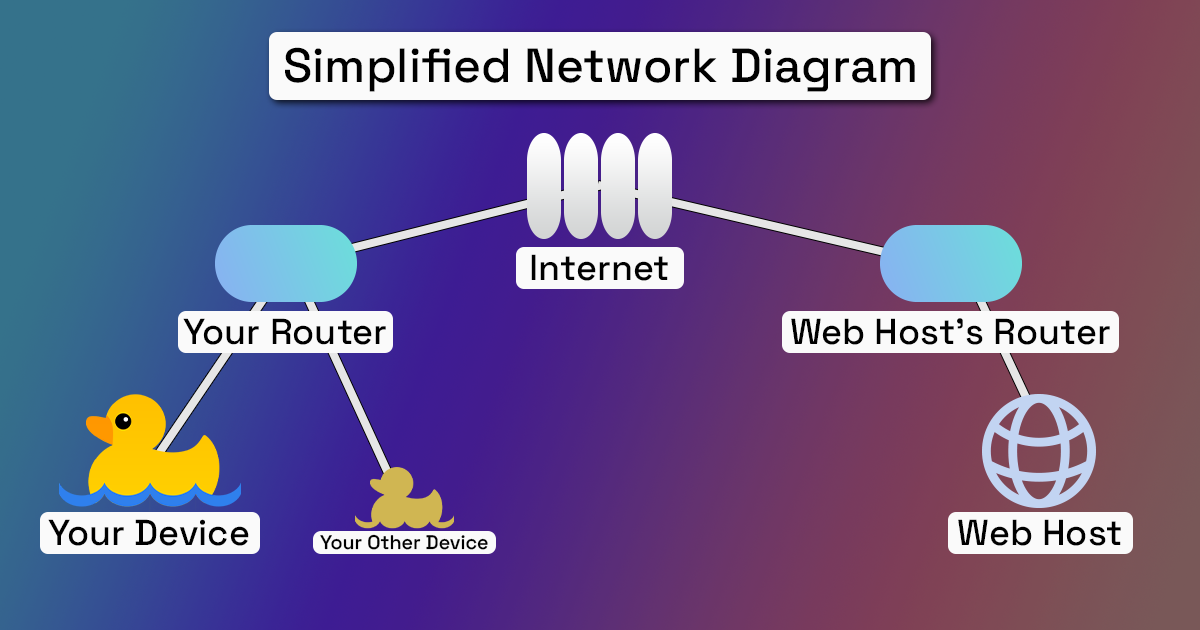
<style>
.page{position:relative;width:1200px;height:630px}
.page>*{position:absolute;margin:0}
.t1{font:48px "SpaceGrotesk-Medium";color:#000000}
.t2{font:36px "SpaceGrotesk-Medium";color:#000000}
.t3{font:19.6px "SpaceGrotesk-Medium";color:#000000}
</style>
<div class="page">
<p class="t1" style="left:285px;top:47px;width:630px;height:45px">Simplified Network Diagram</p>
<p class="t2" style="left:531px;top:254px;width:137px;height:27px">Internet</p>
<p class="t2" style="left:183px;top:318px;width:203px;height:27px">Your Router</p>
<p class="t2" style="left:791px;top:318px;width:319px;height:27px">Web Host’s Router</p>
<p class="t2" style="left:48px;top:519px;width:201px;height:27px">Your Device</p>
<p class="t2" style="left:958px;top:519px;width:163px;height:27px">Web Host</p>
<p class="t3" style="left:320px;top:534px;width:168px;height:16px">Your Other Device</p>
</div>
